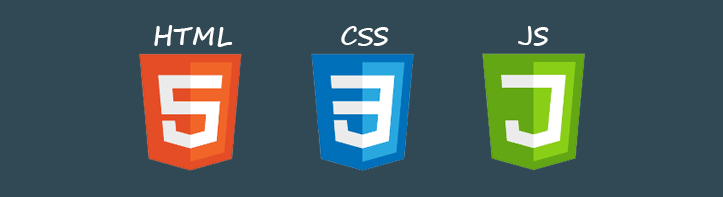
<style>
.page{position:relative;width:723px;height:197px;background:#314955}
.page>*{position:absolute;margin:0}
.t1{font:25px "SegoeScript-Bold";color:#ffffff}
</style>
<div class="page">
<p class="t1" style="left:154px;top:25px;width:79px;height:22px">HTML</p>
<p class="t1" style="left:341px;top:26px;width:48px;height:20px">CSS</p>
<p class="t1" style="left:518px;top:26px;width:31px;height:20px">JS</p>
</div>
